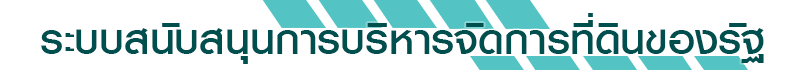
<style>
.page{position:relative;width:785px;height:70px;background:#ffffff}
.page>*{position:absolute;margin:0}
.t1{font:60px "KittithadaMedium65F";color:#004f4f}
</style>
<div class="page">
<p class="t1" style="left:41px;top:13px;width:723px;height:51px">ระบบสนับสนุนการบริหารจัดการที่ดินของรัฐ</p>
</div>
